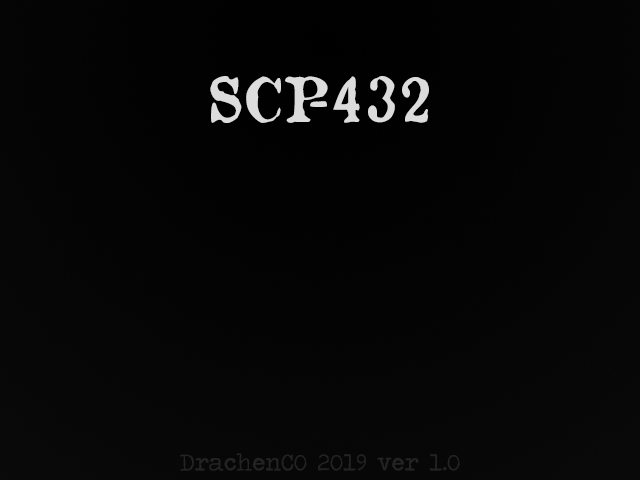
<style>
.page{position:relative;width:640px;height:480px}
.page>*{position:absolute;margin:0}
.t1{font:60px "OldNewspaperTypes";color:#dcdcdc}
.t2{font:24px "TravelingTypewriter";color:#232323}
</style>
<div class="page">
<p class="t1" style="left:210px;top:76px;width:219px;height:47px">SCP-432</p>
<p class="t2" style="left:180px;top:453px;width:280px;height:18px">DrachenCO 2019 ver 1.0</p>
</div>
